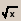
<style>
.page{position:relative;width:21px;height:21px;background:#d9cdc1}
.page>*{position:absolute;margin:0}
.t1{font:9px "Tahoma";color:#000000}
</style>
<div class="page">
<p class="t1" style="left:10px;top:12px;width:5px;height:5px">x</p>
</div>
